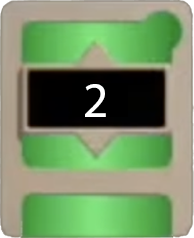
<style>
.page{position:relative;width:194px;height:238px}
.page>*{position:absolute;margin:0}
.t1{font:50px "MyriadPro-Regular";color:#ffffff}
</style>
<div class="page">
<p class="t1" style="left:85px;top:84px;width:21px;height:33px">2</p>
</div>
